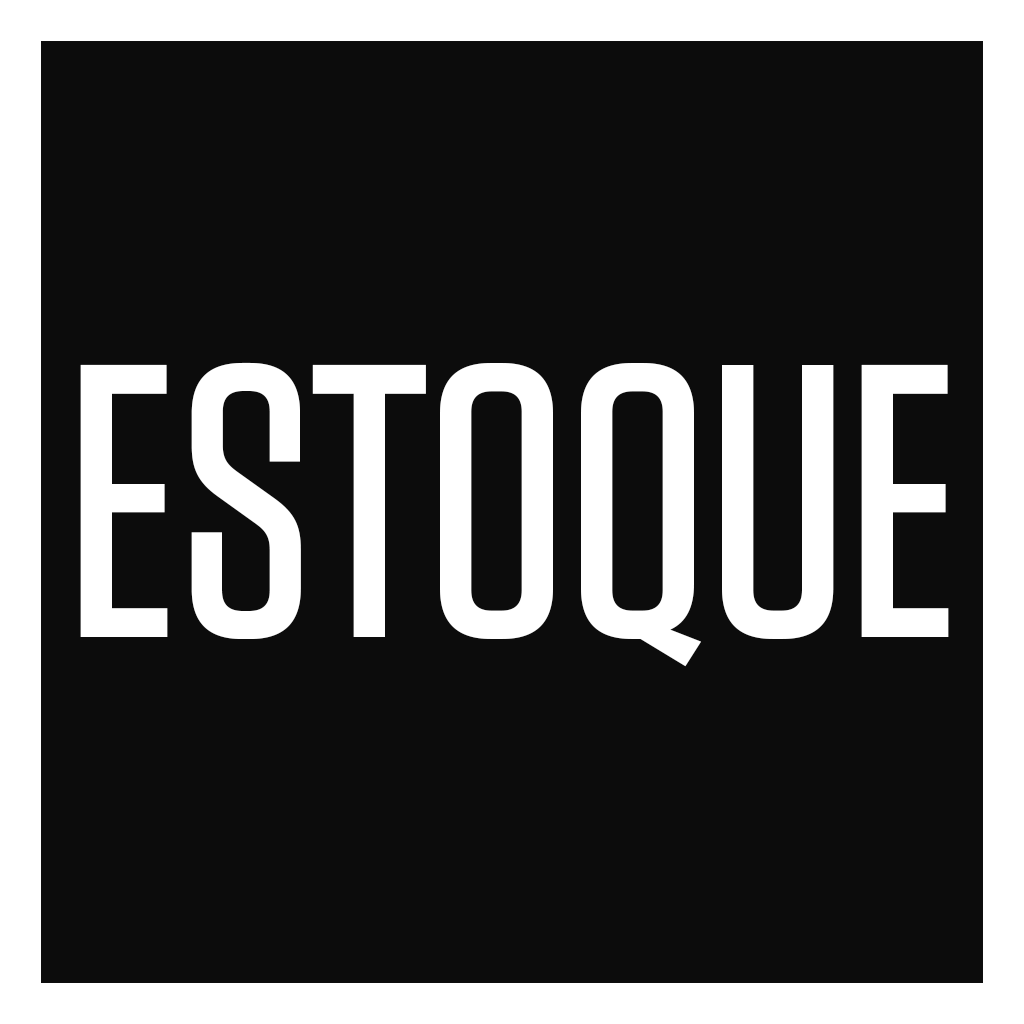
<style>
.page{position:relative;width:1024px;height:1024px;background:#0c0c0c}
.page>*{position:absolute;margin:0}
.t1{font:388.1px "Tungsten-Medium";color:#ffffff;text-transform:uppercase}
</style>
<div class="page">
<p class="t1" style="left:80px;top:362px;width:869px;height:305px">Estoque</p>
</div>
